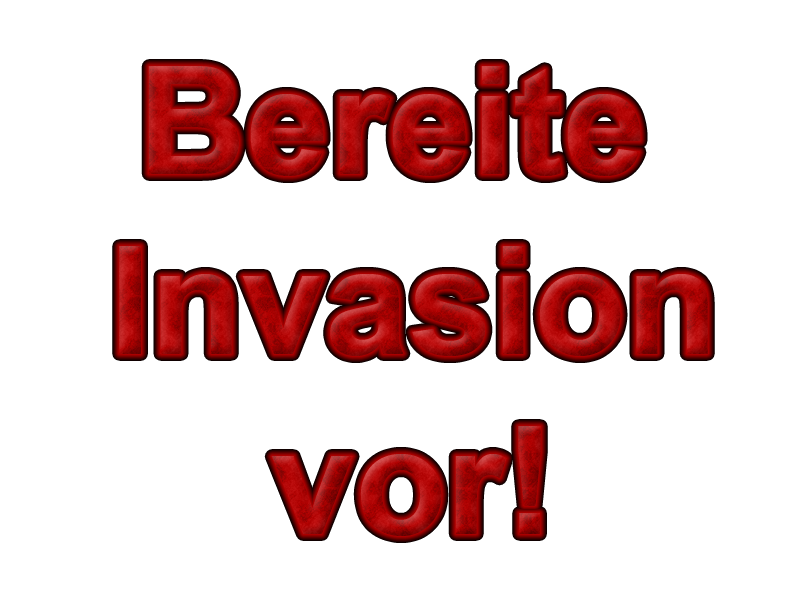
<style>
.page{position:relative;width:800px;height:600px;background:#ffffff}
.page>*{position:absolute;margin:0}
.t1{font:150px "Arial-BoldMT"}
</style>
<div class="page">
<p class="t1" style="left:119px;top:66px;width:589px;height:470px;text-align:center">Bereite <br>Invasion<br>vor!</p>
</div>
